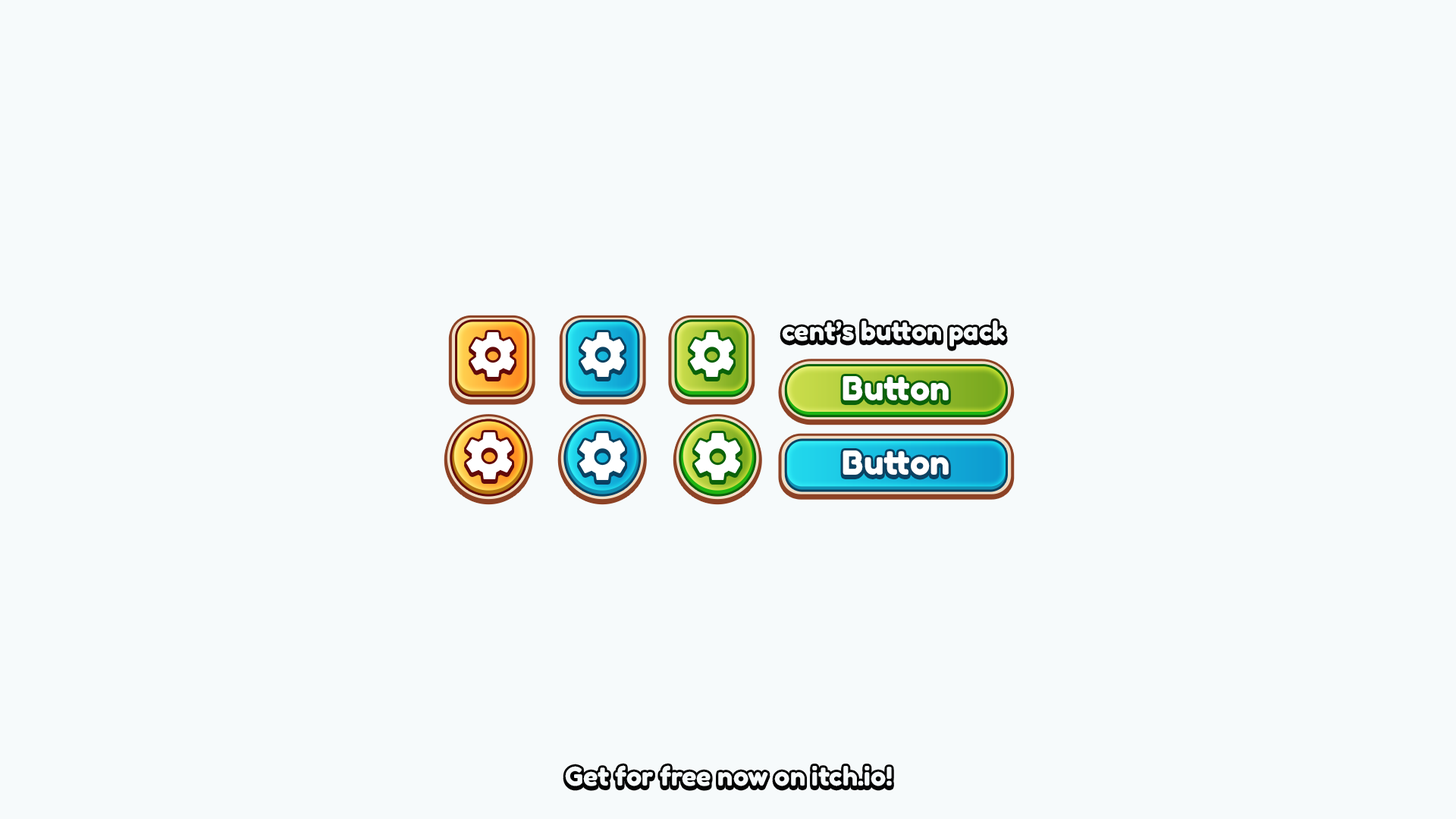
<style>
.page{position:relative;width:1456px;height:819px;background:#f6fafb}
.page>*{position:absolute;margin:0}
.t1{font:25.5px "FredokaOne-Regular";color:#f6fafb}
.t2{font:33.1px "FredokaOne-Regular";color:#ffffff}
</style>
<div class="page">
<p class="t1" style="left:782px;top:320px;width:224px;height:27px">cent’s button pack</p>
<p class="t2" style="left:842px;top:376px;width:107px;height:25px">Button</p>
<p class="t2" style="left:842px;top:450px;width:107px;height:25px">Button</p>
<p class="t1" style="left:565px;top:765px;width:327px;height:21px">Get for free now on itch.io!</p>
</div>
